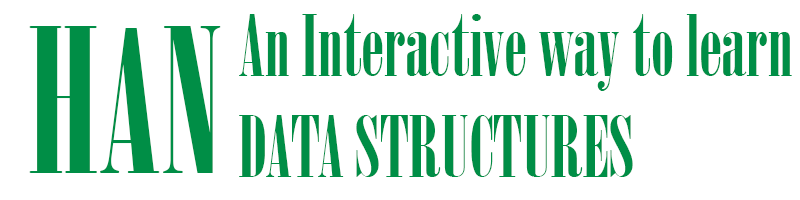
<style>
.page{position:relative;width:800px;height:200px;background:#ffffff}
.page>*{position:absolute;margin:0}
.t1{font:84px "Onyx";color:#008e46}
.t2{font:200px "Onyx";color:#008e46}
</style>
<div class="page">
<p class="t1" style="left:239px;top:14px;width:553px;height:163px">An Interactive way to learn<br>DATA STRUCTURES</p>
<p class="t2" style="left:29px;top:26px;width:192px;height:147px">HAN</p>
</div>
